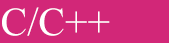
<style>
.page{position:relative;width:169px;height:43px;background:#d22778}
.page>*{position:absolute;margin:0}
.t1{font:40px "TimesNewRomanPSMT";color:#ffffff}
</style>
<div class="page">
<p class="t1" style="left:2px;top:7px;width:108px;height:29px">C/C++</p>
</div>
